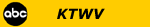
<style>
.page{position:relative;width:150px;height:27px;background:#ffcc00}
.page>*{position:absolute;margin:0}
.t1{font:14px "Verdana-BoldItalic";color:#000000}
</style>
<div class="page">
<p class="t1" style="left:57px;top:8px;width:48px;height:11px">KTWV</p>
</div>
